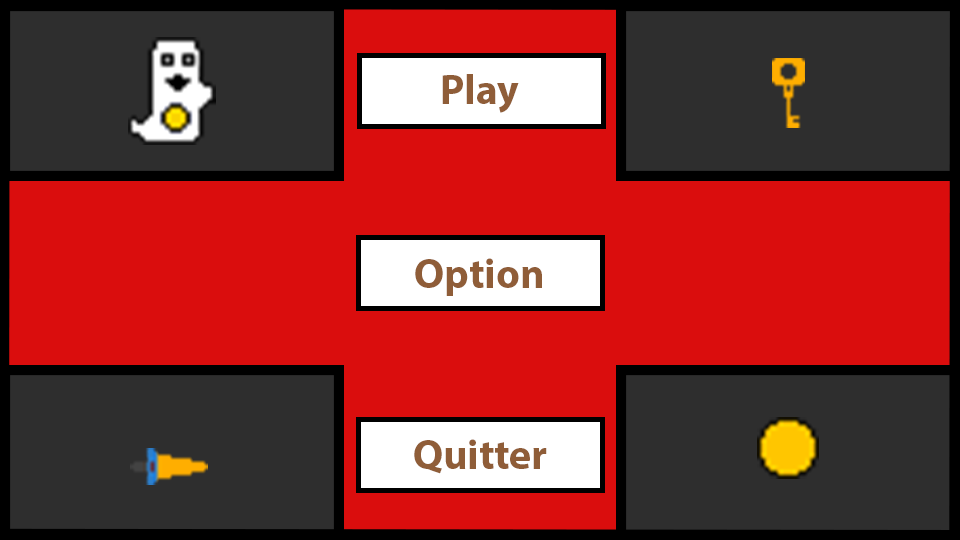
<style>
.page{position:relative;width:960px;height:540px;background:#da0d0d}
.page>*{position:absolute;margin:0}
.t1{font:41.7px "MyriadPro-Bold";color:#8f5d38}
</style>
<div class="page">
<p class="t1" style="left:442px;top:74px;width:77px;height:39px">Play</p>
<p class="t1" style="left:415px;top:258px;width:127px;height:38px">Option</p>
<p class="t1" style="left:414px;top:439px;width:133px;height:35px">Quitter</p>
</div>
